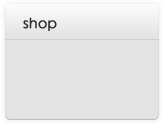
<style>
.page{position:relative;width:165px;height:126px;background:#e3e3e3}
.page>*{position:absolute;margin:0}
.t1{font:14px "CenturyGothic";color:#2c2c2c;font-weight:bold}
</style>
<div class="page">
<p class="t1" style="left:23px;top:17px;width:34px;height:14px">shop</p>
</div>
